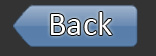
<style>
.page{position:relative;width:156px;height:56px;background:#333333}
.page>*{position:absolute;margin:0}
.t1{font:34px "Calibri";color:#ffffff}
</style>
<div class="page">
<p class="t1" style="left:50px;top:12px;width:62px;height:23px">Back</p>
</div>
